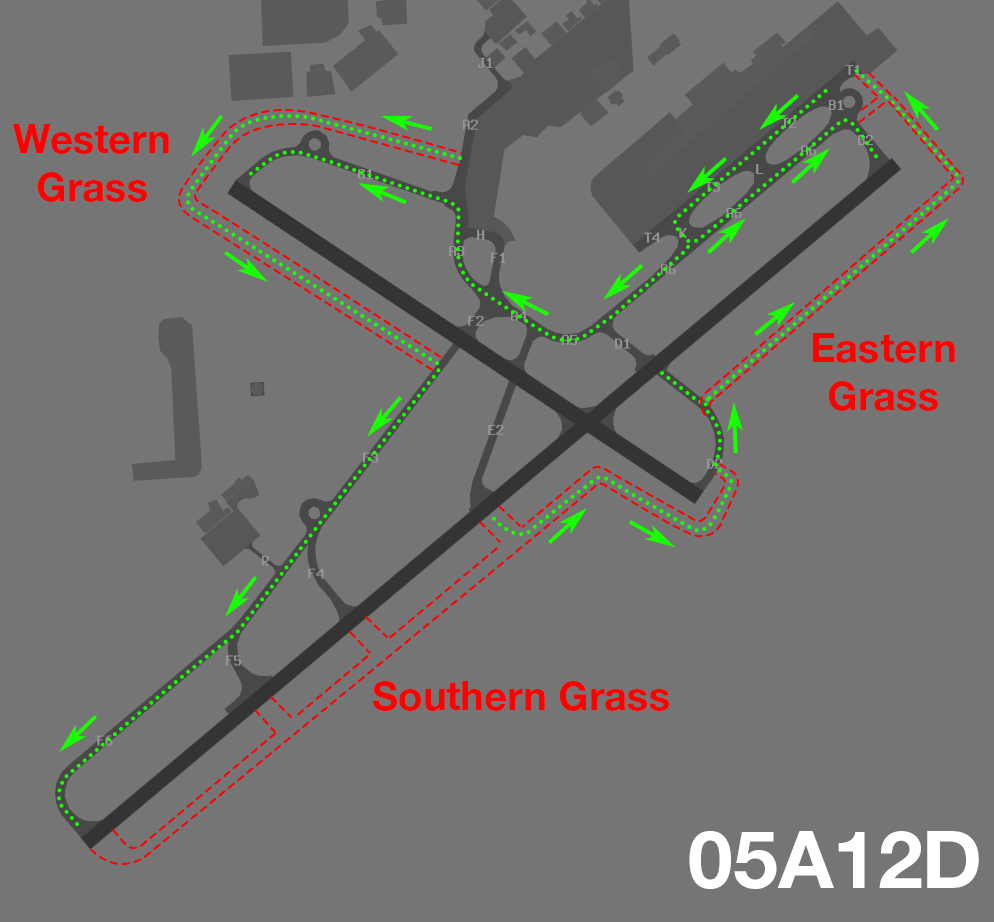
<style>
.page{position:relative;width:994px;height:922px;background:#757575}
.page>*{position:absolute;margin:0}
.t1{font:40px "HelveticaNeueLTStd-Bd";color:#ff0000}
.t2{font:80.2px "HelveticaNeueLTStd-Bd";color:#ffffff}
</style>
<div class="page">
<p class="t1" style="left:13px;top:124px;width:156px;height:78px;text-align:center">Western<br>Grass</p>
<p class="t1" style="left:812px;top:333px;width:143px;height:78px;text-align:center">Eastern<br>Grass</p>
<p class="t1" style="left:373px;top:681px;width:296px;height:30px">Southern Grass</p>
<p class="t2" style="left:689px;top:831px;width:290px;height:58px">05A12D</p>
</div>
